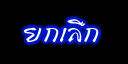
<style>
.page{position:relative;width:128px;height:64px;background:#000000}
.page>*{position:absolute;margin:0}
.t1{font:36px "DsSupasawatD";color:#ffffff}
</style>
<div class="page">
<p class="t1" style="left:24px;top:19px;width:75px;height:23px">Â¡àÅ×¡</p>
</div>
